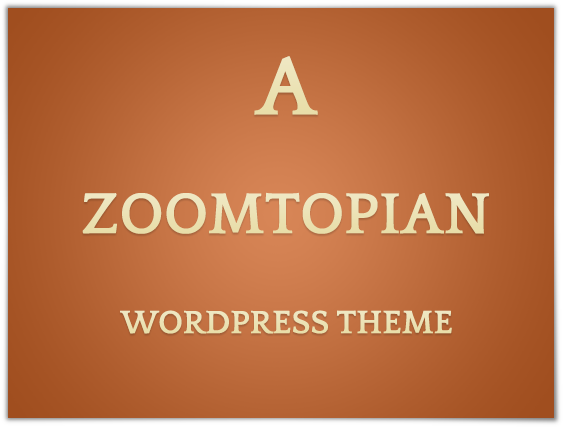
<style>
.page{position:relative;width:563px;height:427px}
.page>*{position:absolute;margin:0}
.t1{font:86.8px "Quattrocento-Bold";color:#ebe1b3;text-transform:uppercase}
.t2{font:60.2px "Quattrocento-Bold";color:#ece2b6;text-transform:uppercase}
.t3{font:33.6px "Quattrocento-Bold";color:#ece3b7;text-transform:uppercase}
</style>
<div class="page">
<p class="t1" style="left:254px;top:56px;width:64px;height:59px">A</p>
<p class="t2" style="left:82px;top:192px;width:407px;height:42px">Zoomtopian</p>
<p class="t3" style="left:120px;top:310px;width:332px;height:24px">Wordpress THEME</p>
</div>
